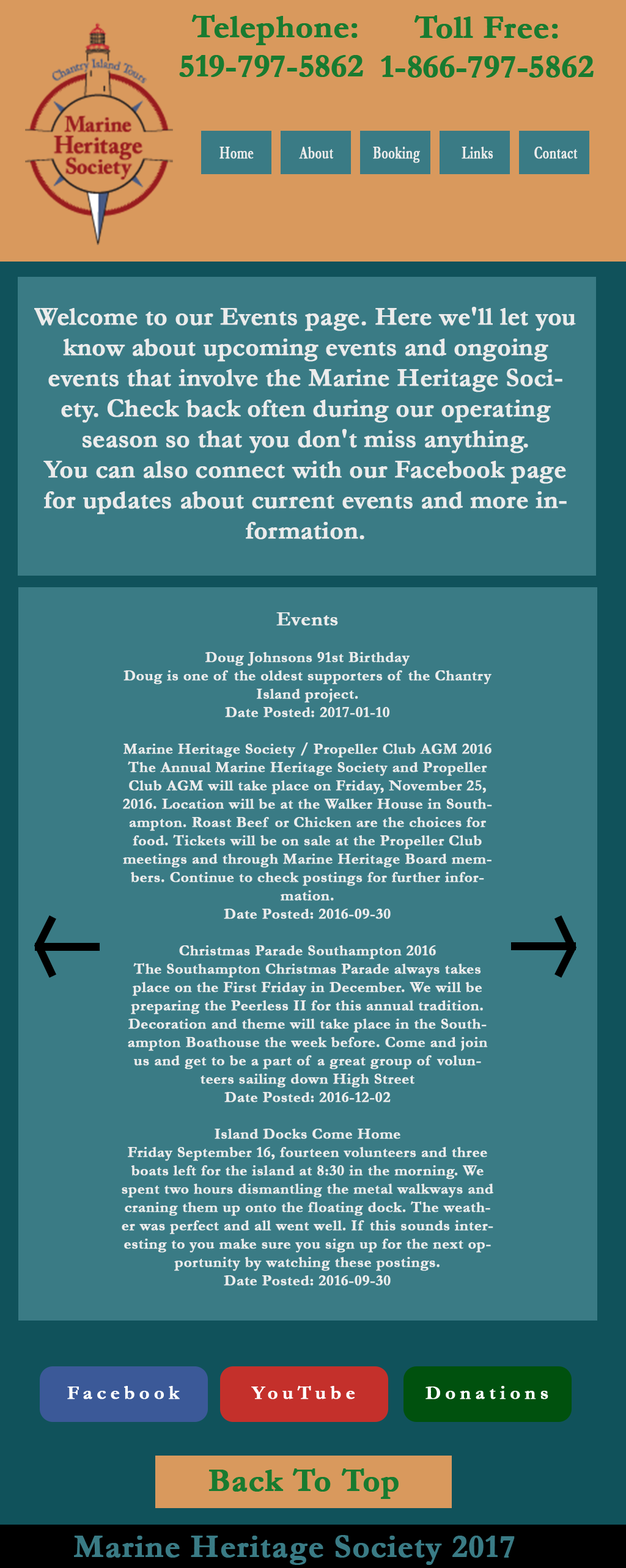
<style>
.page{position:relative;width:626px;height:1568px;background:#3a7b85}
.page>*{position:absolute;margin:0}
.t1{font:32.7px "Garamond-Bold";letter-spacing:-0.01em;color:#197b30;font-weight:bold}
.t2{font:32.7px "Garamond-Bold";color:#197b30;font-weight:bold}
.t3{font:17.5px "Garamond-Bold";color:#ebebeb;font-weight:bold;scale:0.69 1}
.t4{font:25.5px "Garamond-Bold";color:#ebebeb;font-weight:bold}
.t5{font:15.3px "Garamond-Bold";color:#ebebeb;font-weight:bold}
.t6{font:20.4px "Garamond-Bold";color:#ebebeb;font-weight:bold}
.t7{font:19.3px "Garamond-Bold";letter-spacing:0.2em;color:#fefefe;font-weight:bold}
.t8{font:19.3px "Garamond-Bold";letter-spacing:0.2em;color:#ffffff;font-weight:bold}
.t9{font:32.7px "Garamond-Bold";color:#3a7b85;font-weight:bold}
</style>
<div class="page">
<p class="t1" style="left:179px;top:15px;width:184px;height:62px;text-align:center"><span class="t2">Telephone:<br></span>519-797-5862</p>
<p class="t1" style="left:381px;top:15px;width:212px;height:63px;text-align:center"><span class="t2">Toll Free:<br></span>1-866-797-5862</p>
<p class="t3" style="left:219px;top:147px;width:35px;height:12px">Home</p>
<p class="t3" style="left:299px;top:147px;width:34px;height:12px">About</p>
<p class="t3" style="left:373px;top:147px;width:47px;height:16px">Booking</p>
<p class="t3" style="left:461px;top:147px;width:32px;height:12px">Links</p>
<p class="t3" style="left:534px;top:147px;width:43px;height:12px">Contact</p>
<p class="t4" style="left:34px;top:307px;width:542px;height:233px;text-align:center">Welcome to our Events page. Here we'll let you know about upcoming events and ongoing events that involve the Marine Heritage Society. Check back often during our operating season so that you don't miss anything.<br>You can also connect with our Facebook page for updates about current events and more information.</p>
<p class="t5" style="left:122px;top:612px;width:371px;height:674px;text-align:center"><span class="t6"><br>Events<br></span><br>Doug Johnsons 91st Birthday<br>Doug is one of the oldest supporters of the Chantry Island project.<br>Date Posted: 2017-01-10<br><br>Marine Heritage Society / Propeller Club AGM 2016<br>The Annual Marine Heritage Society and Propeller Club AGM will take place on Friday, November 25, 2016. Location will be at the Walker House in Southampton. Roast Beef or Chicken are the choices for food. Tickets will be on sale at the Propeller Club meetings and through Marine Heritage Board members. Continue to check postings for further information.<br>Date Posted: 2016-09-30<br><br>Christmas Parade Southampton 2016<br>The Southampton Christmas Parade always takes place on the First Friday in December. We will be preparing the Peerless II for this annual tradition. Decoration and theme will take place in the Southampton Boathouse the week before. Come and join us and get to be a part of a great group of volunteers sailing down High Street<br>Date Posted: 2016-12-02<br><br>Island Docks Come Home<br>Friday September 16, fourteen volunteers and three boats left for the island at 8:30 in the morning. We spent two hours dismantling the metal walkways and craning them up onto the floating dock. The weather was perfect and all went well. If this sounds interesting to you make sure you sign up for the next opportunity by watching these postings.<br>Date Posted: 2016-09-30</p>
<p class="t7" style="left:67px;top:1386px;width:113px;height:13px">Facebook</p>
<p class="t8" style="left:251px;top:1386px;width:104px;height:13px">YouTube</p>
<p class="t8" style="left:425px;top:1386px;width:123px;height:13px">Donations</p>
<p class="t2" style="left:208px;top:1468px;width:190px;height:31px">Back To Top</p>
<p class="t9" style="left:74px;top:1535px;width:441px;height:30px">Marine Heritage Society 2017</p>
</div>
